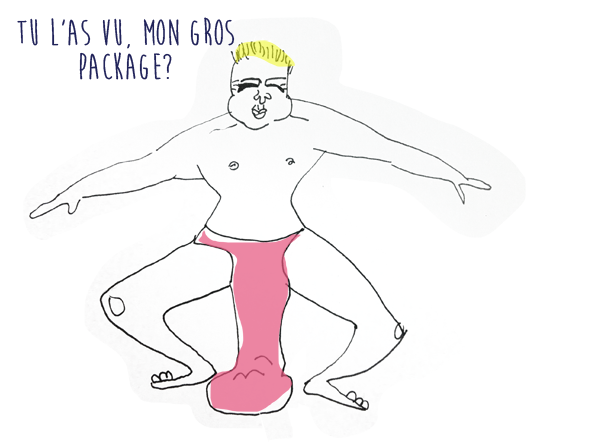
<style>
.page{position:relative;width:600px;height:448px;background:#ffffff}
.page>*{position:absolute;margin:0}
.t1{font:37.4px "MoonFlowerBold";color:#21235a}
</style>
<div class="page">
<p class="t1" style="left:17px;top:17px;width:218px;height:63px">TU l’as vu, Mon gros package?</p>
</div>
